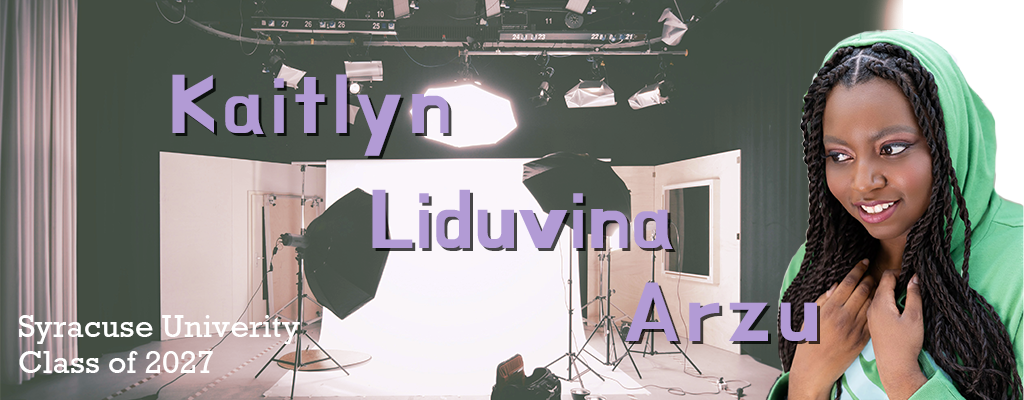
<style>
.page{position:relative;width:1024px;height:400px}
.page>*{position:absolute;margin:0}
.t1{font:80.1px "BMHANNAProOTF";letter-spacing:0.07em;color:#b29bd5}
.t2{font:80.1px "BMHANNAProOTF"}
.t3{font:30px "Rockwell-Regular";color:#ffffff}
</style>
<div class="page">
<p class="t1" style="left:172px;top:74px;width:277px;height:82px">Kaitlyn</p>
<p class="t1" style="left:175px;top:77px;width:277px;height:82px">Kaitlyn</p>
<p class="t2" style="left:375px;top:192px;width:301px;height:60px">Liduvina</p>
<p class="t1" style="left:625px;top:282px;width:192px;height:59px">Arzu</p>
<p class="t3" style="left:19px;top:315px;width:281px;height:58px">Syracuse Univerity<br>Class of 2027</p>
</div>
